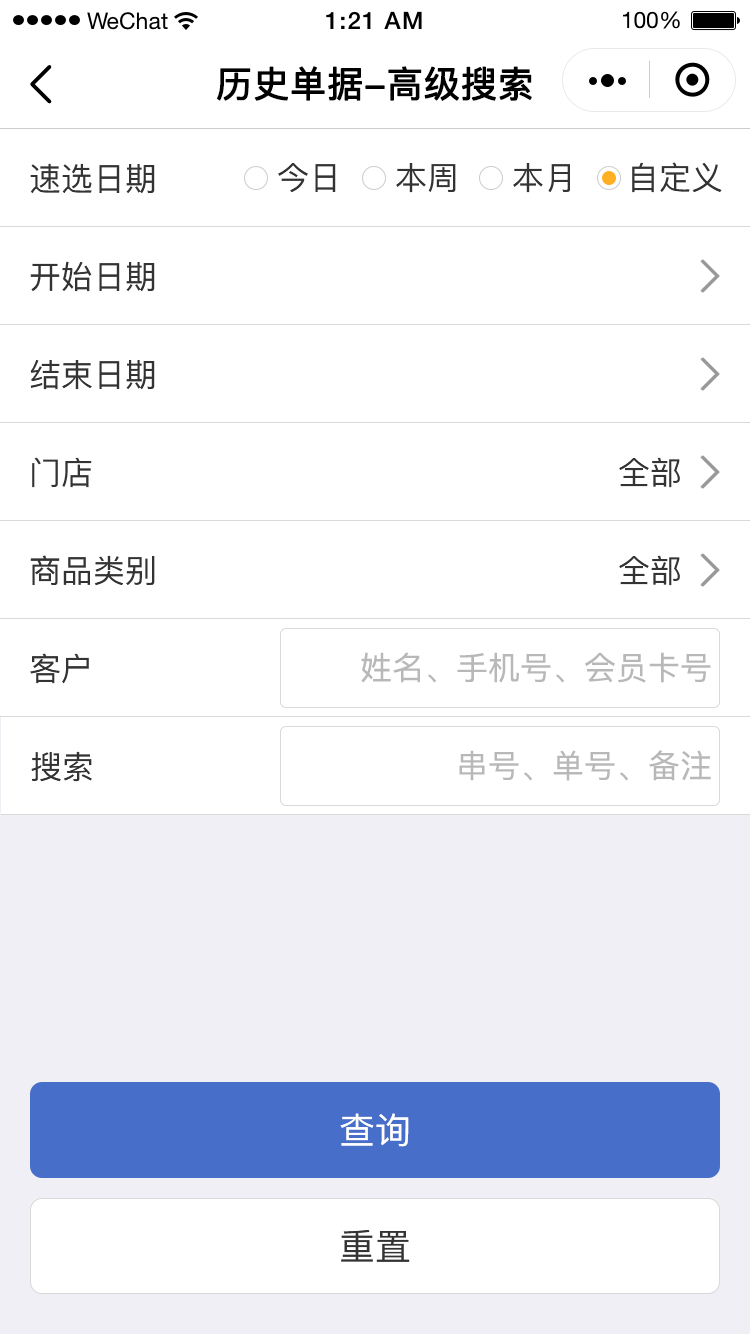
<style>
.page{position:relative;width:750px;height:1334px;background:#ffffff}
.page>*{position:absolute;margin:0}
.t1{font:36px "PingFang-SC-Medium";color:#000000;font-weight:bold}
.t2{font:32px "PingFang-SC-Medium";color:#333333}
.t3{font:32px "PingFang-SC-Medium";color:#b8b8b8}
.t4{font:36px "PingFang-SC-Medium";color:#ffffff}
.t5{font:36px "PingFang-SC-Medium";color:#333333}
</style>
<div class="page">
<p class="t1" style="left:216px;top:66px;width:316px;height:35px">历史单据-高级搜索</p>
<p class="t2" style="left:30px;top:163px;width:125px;height:31px">速选日期</p>
<p class="t2" style="left:278px;top:163px;width:58px;height:30px">今日</p>
<p class="t2" style="left:396px;top:163px;width:60px;height:30px">本周</p>
<p class="t2" style="left:513px;top:163px;width:57px;height:30px">本月</p>
<p class="t2" style="left:632px;top:162px;width:90px;height:31px">自定义</p>
<p class="t2" style="left:30px;top:261px;width:125px;height:31px">开始日期</p>
<p class="t2" style="left:30px;top:359px;width:125px;height:31px">结束日期</p>
<p class="t2" style="left:32px;top:457px;width:60px;height:31px">门店</p>
<p class="t2" style="left:619px;top:457px;width:61px;height:31px">全部</p>
<p class="t2" style="left:30px;top:555px;width:125px;height:31px">商品类别</p>
<p class="t2" style="left:619px;top:555px;width:61px;height:31px">全部</p>
<p class="t2" style="left:30px;top:653px;width:59px;height:31px">客户</p>
<p class="t3" style="left:361px;top:652px;width:350px;height:31px">姓名、手机号、会员卡号</p>
<p class="t3" style="left:459px;top:750px;width:252px;height:31px">串号、单号、备注</p>
<p class="t2" style="left:31px;top:751px;width:61px;height:31px">搜索</p>
<p class="t4" style="left:340px;top:1113px;width:69px;height:34px">查询</p>
<p class="t5" style="left:341px;top:1229px;width:69px;height:33px">重置</p>
</div>
